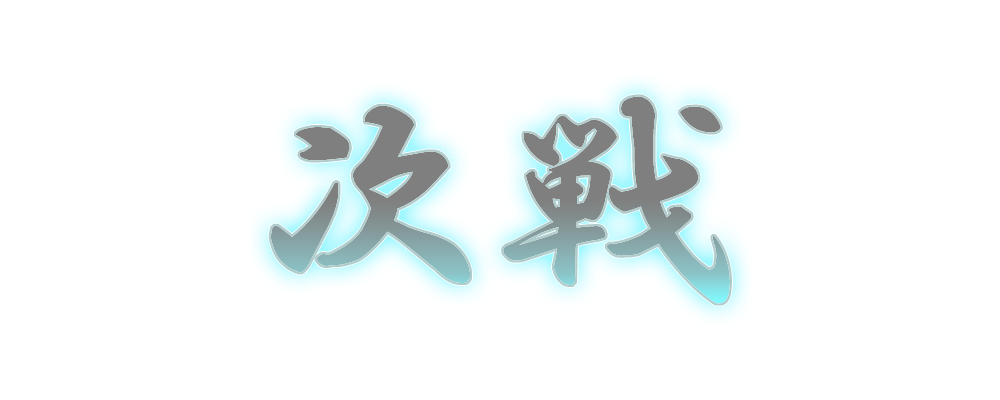
<style>
.page{position:relative;width:1000px;height:400px;background:#ffffff}
.page>*{position:absolute;margin:0}
.t1{font:238.9px "HGSGyoshotai";font-weight:bold}
</style>
<div class="page">
<p class="t1" style="left:270px;top:96px;width:460px;height:208px">次戦</p>
</div>
